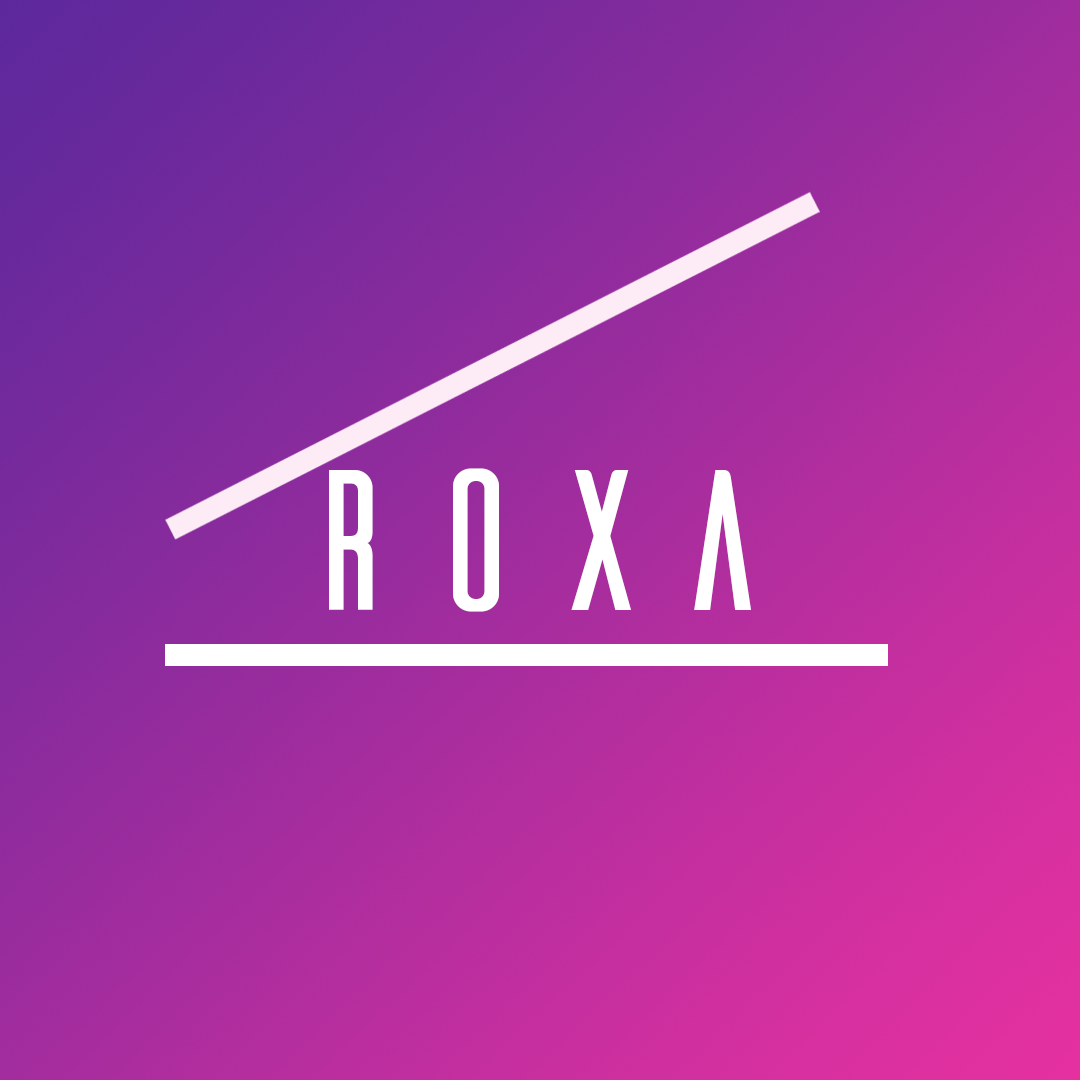
<style>
.page{position:relative;width:1080px;height:1080px}
.page>*{position:absolute;margin:0}
.t1{font:200px "Ailerons-Regular";letter-spacing:0.025em;color:#ffffff}
</style>
<div class="page">
<p class="t1" style="left:329px;top:468px;width:422px;height:144px">RoXA</p>
</div>
